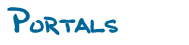
<style>
.page{position:relative;width:189px;height:45px;background:#ffffff}
.page>*{position:absolute;margin:0}
.t1{font:18px "BobbiesHand";color:#006699}
.t2{font:30px "BobbiesHand";color:#006699}
</style>
<div class="page">
<p class="t1" style="left:8px;top:8px;width:109px;height:27px"><span class="t2">P</span>ORTALS</p>
</div>
